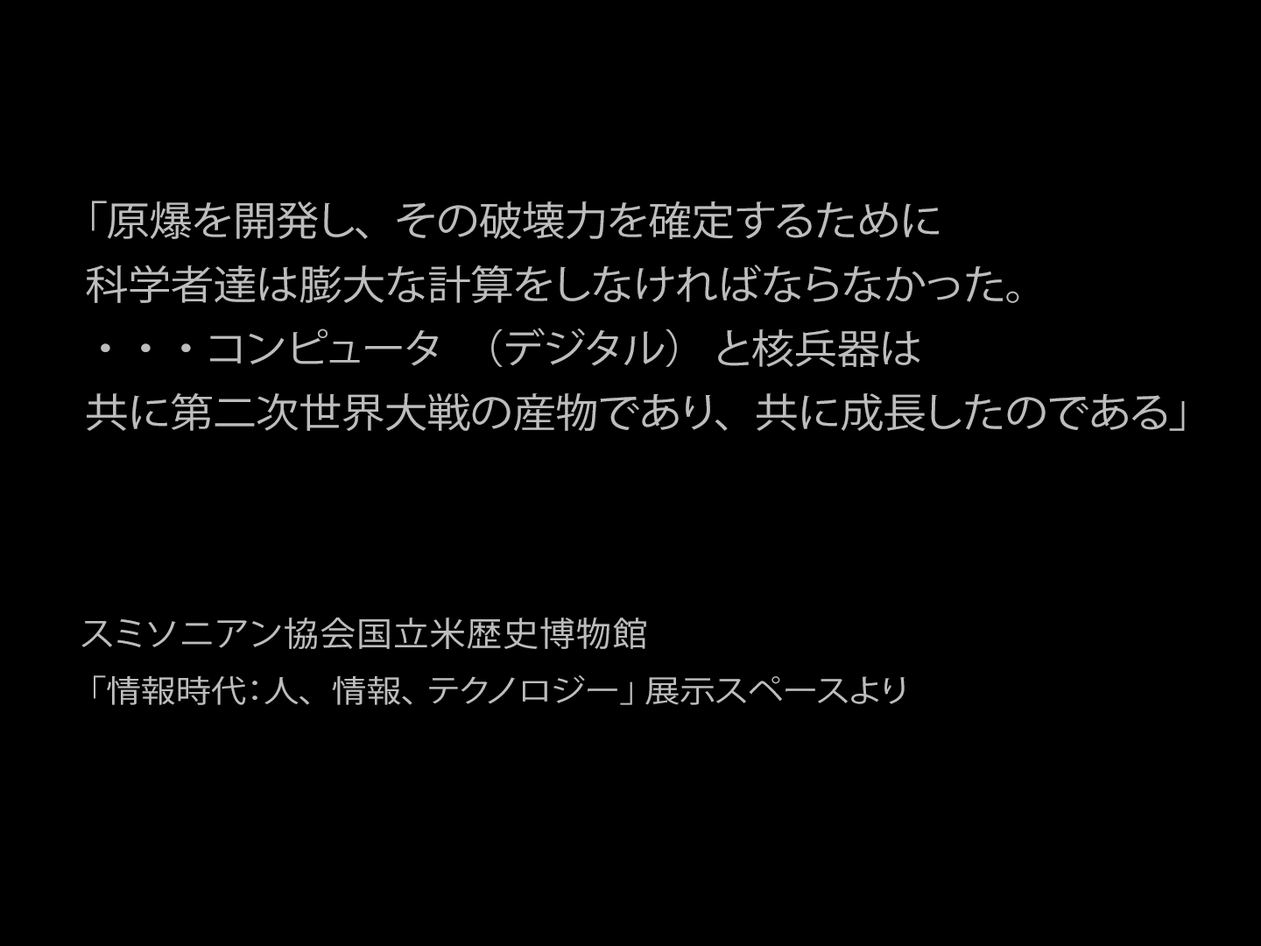
<style>
.page{position:relative;width:1261px;height:946px;background:#000000}
.page>*{position:absolute;margin:0}
.t1{font:40.1px/63.9px "KozGoPr6N-Regular";letter-spacing:-0.012em;color:#bdbdbd;scale:1.08 1}
.t2{font:33.7px "KozGoPr6N-Regular";letter-spacing:0.03em;color:#bdbdbd;scale:1.05 1}
.t3{font:30.8px "KozGoPr6N-Regular";color:#bdbdbd;scale:1.14 1}
.t4{font:30.8px "MyriadPro-Regular";color:#bdbdbd;scale:1.14 1}
</style>
<div class="page">
<p class="t1" style="left:86px;top:201px;width:1099px;height:230px">「原爆を開発し、  その破壊力を確定するために<br>科学者達は膨大な計算をしなければならなかった。<br> ・  ・  ・ コンピュータ    （デジタル）   と核兵器は<br>共に第二次世界大戦の産物であり、  共に成長したのである」</p>
<p class="t2" style="left:81px;top:617px;width:565px;height:32px">スミソニアン協会国立米歴史博物館</p>
<p class="t3" style="left:94px;top:675px;width:811px;height:30px"><span class="t4"> </span>「情報時代：人、  情報、 テクノロジー」 展示スペースより</p>
</div>
